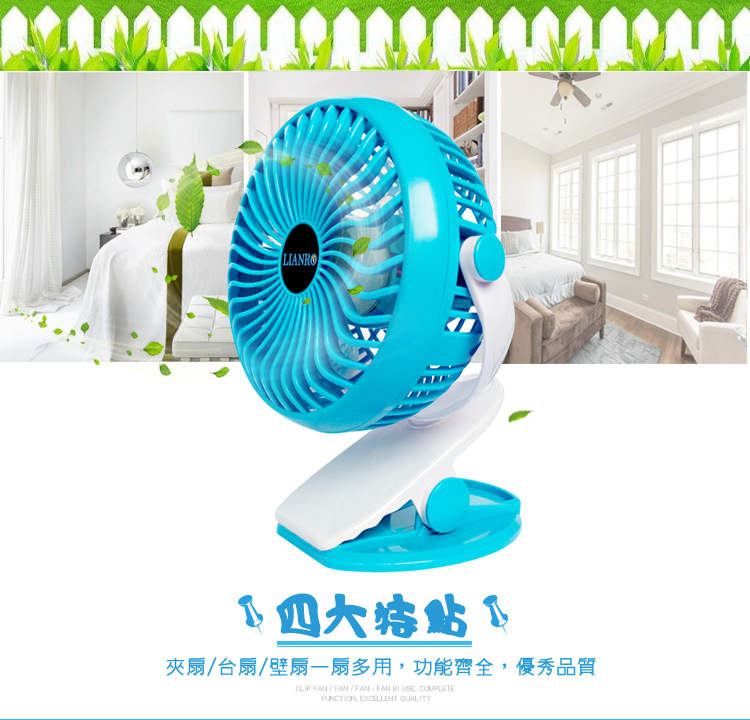
<style>
.page{position:relative;width:750px;height:720px;background:#ffffff}
.page>*{position:absolute;margin:0}
.t1{font:48px "HanWangCC02";letter-spacing:-0.01em;color:#289ad6;font-weight:bold}
.t2{font:20px "winman-tun33014";letter-spacing:-0.01em;color:#289ad6;font-weight:bold}
</style>
<div class="page">
<p class="t1" style="left:276px;top:593px;width:191px;height:46px">四大特點</p>
<p class="t2" style="left:166px;top:657px;width:430px;height:19px">夾扇/台扇/壁扇一扇多用，功能齊全，優秀品質</p>
</div>
